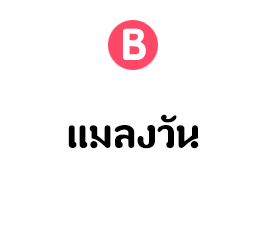
<style>
.page{position:relative;width:272px;height:231px;background:#ffffff}
.page>*{position:absolute;margin:0}
.t1{font:65px "paaymaay";color:#ffffff}
.t2{font:60px "paaymaay";color:#000000}
</style>
<div class="page">
<p class="t1" style="left:103px;top:28px;width:43px;height:43px">ฺฺB</p>
<p class="t2" style="left:68px;top:114px;width:131px;height:35px">แมลงวัน</p>
</div>
